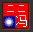
<style>
.page{position:relative;width:33px;height:32px;background:#f20000}
.page>*{position:absolute;margin:0}
.t1{font:10.4px "SimSun";color:#ffffff}
.t2{font:11.7px "SimSun";color:#ffffff}
</style>
<div class="page">
<p class="t1" style="left:7px;top:5px;width:18px;height:7px">二二</p>
<p class="t2" style="left:16px;top:15px;width:11px;height:12px">冯</p>
</div>
